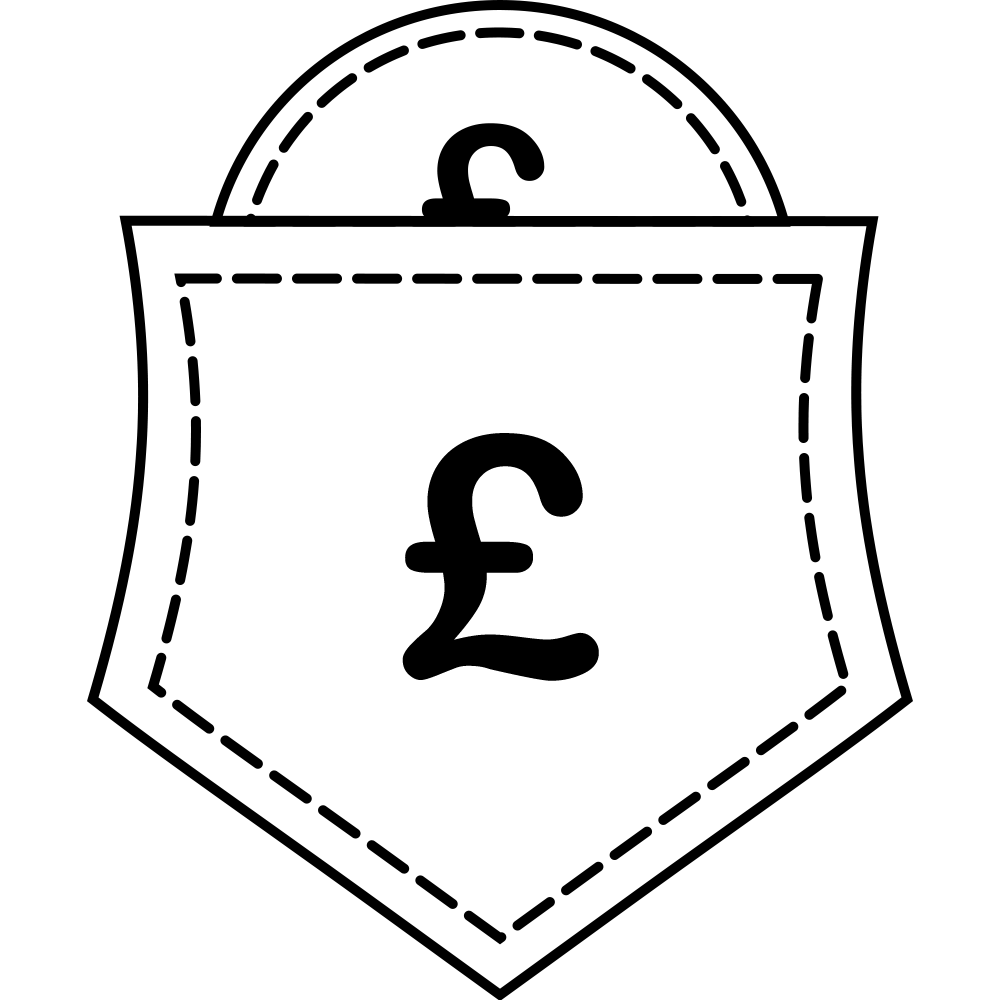
<style>
.page{position:relative;width:1000px;height:1000px;background:#ffffff}
.page>*{position:absolute;margin:0}
.t1{font:333px "ArialRoundedMTBold";color:#000000}
</style>
<div class="page">
<p class="t1" style="left:402px;top:433px;width:197px;height:248px">£</p>
</div>
